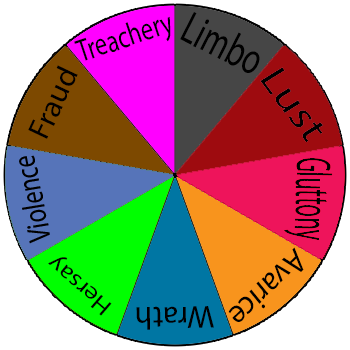
<style>
.page{position:relative;width:350px;height:350px;background:#ffffff}
.page>*{position:absolute;margin:0}
.t1{font:31.8px "MyriadPro-Regular";color:#000000;scale:0.76 1}
.t2{font:30.8px "MyriadPro-Regular";color:#000000;scale:1.03 1}
.t3{font:23.4px "MyriadPro-Regular";color:#000000;scale:1.16 1}
.t4{font:33px "MyriadPro-Regular";color:#000000;scale:0.94 1}
.t5{font:31.8px "MyriadPro-Regular";color:#000000}
</style>
<div class="page">
<p class="t1" style="left:74px;top:16px;width:97px;height:45px;rotate:-18deg">Treachery</p>
<p class="t2" style="left:28px;top:65px;width:50px;height:74px;rotate:-65deg">Fraud</p>
<p class="t3" style="left:48px;top:257px;width:64px;height:59px;rotate:-139deg">Hersay</p>
<p class="t4" style="left:228px;top:247px;width:76px;height:75px;rotate:136deg">Avarice</p>
<p class="t5" style="left:136px;top:306px;width:78px;height:24px;rotate:179deg">Wrath</p>
</div>
